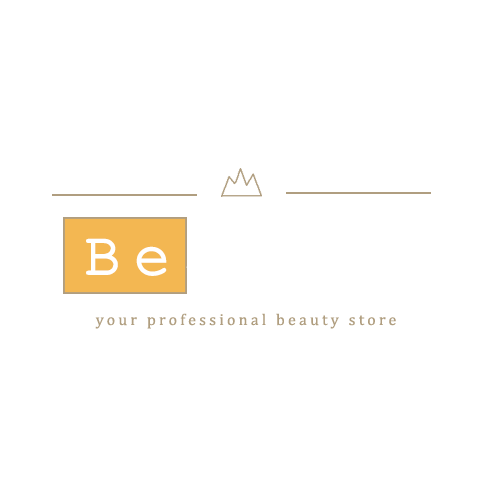
<style>
.page{position:relative;width:500px;height:500px;background:#ffffff}
.page>*{position:absolute;margin:0}
.t1{font:16px "Cambria";letter-spacing:0.2em;color:#b09e80}
</style>
<div class="page">
<p class="t1" style="left:95px;top:313px;width:301px;height:16px">your professional beauty store</p>
</div>
